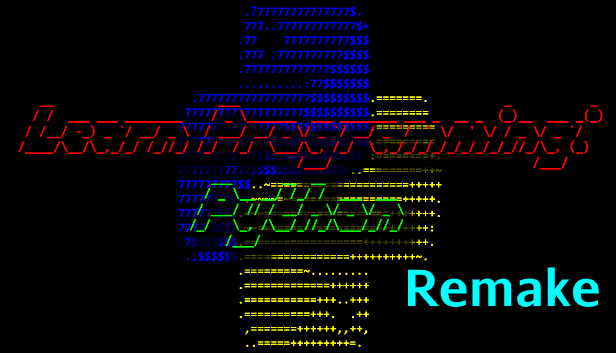
<style>
.page{position:relative;width:616px;height:353px;background:#000000}
.page>*{position:absolute;margin:0}
.t1{font:12px "CamingoCode-Bold"}
.t2{font:13px "CamingoCode-Bold";color:#ff0000}
.t3{font:13px "CamingoCode-Bold";color:#00ff00}
.t4{font:50px "AurulentSans-Bold";color:#00ffff}
</style>
<div class="page">
<p class="t1" style="left:178px;top:6px;width:264px;height:341px">.?77777777777777$.<br>          777..777777777777$+<br>         .77    7777777777$$$<br>         .777 .7777777777$$$$<br>         .7777777777777$$$$$$<br>         ..........:77$$$$$$$<br>  .77777777777777777$$$$$$$$$.=======.<br> 777777777777777777$$$$$$$$$$.========<br>7777777777777777$$$$$$$$$$$$$.=========<br>77777777777777$$$$$$$$$$$$$$$.=========<br>777777777777$$$$$$$$$$$$$$$$ :========+.<br>77777777777$$$$$$$$$$$$$$+..=========++~<br>777777777$$..~=====================+++++<br>77777777$~.~~~~=~=================+++++.<br>777777$$$.~~~===================+++++++.<br>77777$$$$.~~==================++++++++:<br> 7$$$$$$$.==================++++++++++.<br> .,$$$$$$.================++++++++++~.<br>         .=========~.........<br>         .=============++++++<br>         .===========+++..+++<br>         .==========+++.  .++<br>          ,=======++++++,,++,<br>          ..=====+++++++++=.</p>
<p class="t2" style="left:18px;top:105px;width:585px;height:143px">__                       ___                                     _           _<br>  / /  ___ ___ ________    / _ \_______  ___ ________ ___ _  __ _  (_)__  ___ _(_)<br> / /__/ -_) _ `/ __/ _ \  / ___/ __/ _ \/ _ `/ __/ _ `/  ' \/  ' \/ / _ \/ _ `/<br>/____/\__/\_,_/_/ /_//_/ /_/  /_/  \___/\_, /_/  \_,_/_/_/_/_/_/_/_/_//_/\_, (_)<br>                                       /___/                            /___/<br><span class="t3">                           ___       __  __<br>                          / _ \__ __/ /_/ /  ___  ___<br>                         / ___/ // / __/ _ \/ _ \/ _ \<br>                        /_/   \_, /\__/_//_/\___/_//_/<br>                             /___/</span></p>
<p class="t4" style="left:407px;top:267px;width:192px;height:40px">Remake</p>
</div>
